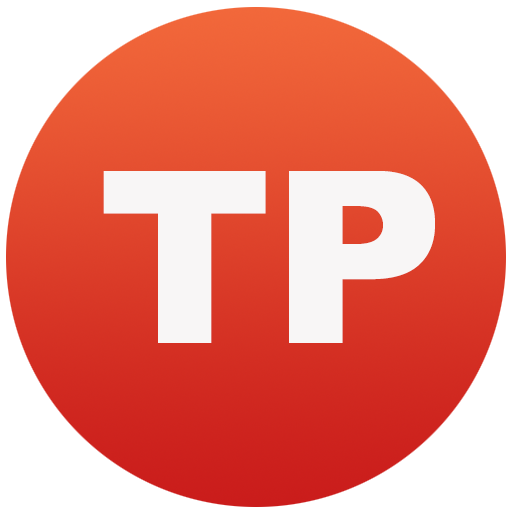
<style>
.page{position:relative;width:512px;height:512px;background:#ffffff}
.page>*{position:absolute;margin:0}
.t1{font:240px "Arial-Black";color:#f8f6f6}
</style>
<div class="page">
<p class="t1" style="left:103px;top:171px;width:332px;height:172px">TP</p>
</div>
